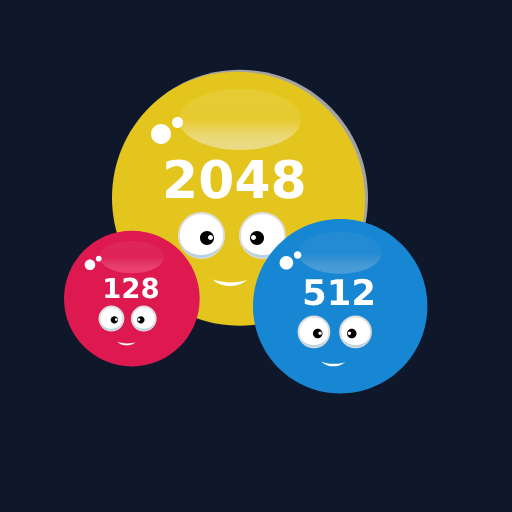
<style>
.page{position:relative;width:512px;height:512px;background:#0f172a}
.page>*{position:absolute;margin:0}
.t1{font:52px "DejaVuSans-Bold";color:#ffffff}
.t2{font:27.6px "DejaVuSans-Bold";color:#ffffff}
.t3{font:35.4px "DejaVuSans-Bold";color:#ffffff}
</style>
<div class="page">
<p class="t1" style="left:166px;top:159px;width:138px;height:40px">2048</p>
<p class="t2" style="left:105px;top:277px;width:53px;height:22px">128</p>
<p class="t3" style="left:304px;top:278px;width:69px;height:28px">512</p>
</div>
